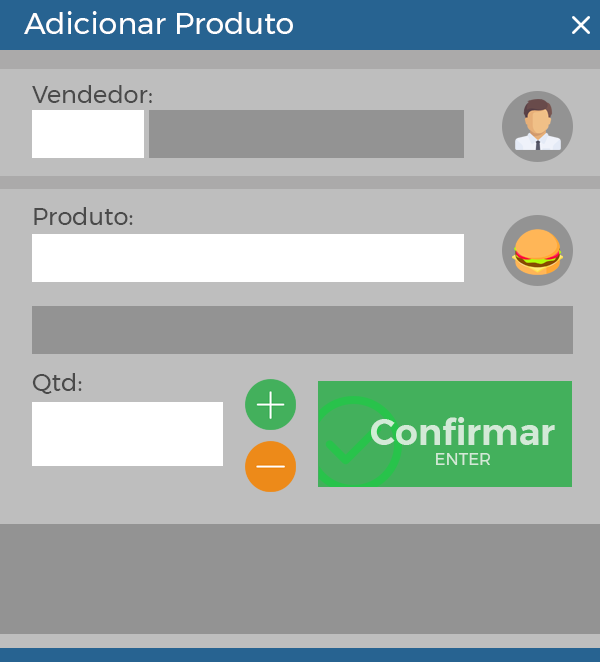
<style>
.page{position:relative;width:600px;height:662px;background:#bebebe}
.page>*{position:absolute;margin:0}
.t1{font:30px "Montserrat-Regular";color:#ffffff}
.t2{font:24px "Montserrat-Regular";color:#4a4a4a}
.t3{font:36px "Montserrat-SemiBold";color:#d3e9d7}
.t4{font:16.7px "Montserrat-Regular";color:#d3e9d7}
</style>
<div class="page">
<p class="t1" style="left:24px;top:11px;width:269px;height:23px">Adicionar Produto</p>
<p class="t2" style="left:32px;top:85px;width:120px;height:18px">Vendedor:</p>
<p class="t2" style="left:34px;top:207px;width:99px;height:18px">Produto:</p>
<p class="t2" style="left:32px;top:373px;width:50px;height:21px">Qtd:</p>
<p class="t3" style="left:371px;top:417px;width:184px;height:48px;text-align:center">Confirmar<br><span class="t4">ENTER</span></p>
</div>
